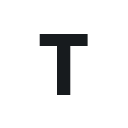
<style>
.page{position:relative;width:128px;height:128px;background:#ffffff}
.page>*{position:absolute;margin:0}
.t1{font:86px "Avenir-Black";color:#171b1e}
</style>
<div class="page">
<p class="t1" style="left:39px;top:34px;width:49px;height:61px">T</p>
</div>
